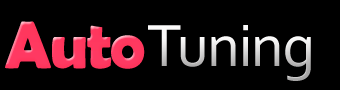
<style>
.page{position:relative;width:340px;height:90px;background:#000000}
.page>*{position:absolute;margin:0}
.t1{font:66.7px "BerlinSansFBDemi-Bold";letter-spacing:-0.025em;color:#ff3960}
.t2{font:62.5px "Corbel";letter-spacing:-0.025em}
</style>
<div class="page">
<p class="t1" style="left:5px;top:21px;width:140px;height:48px">Auto</p>
<p class="t2" style="left:148px;top:25px;width:163px;height:56px">Tuning</p>
</div>
